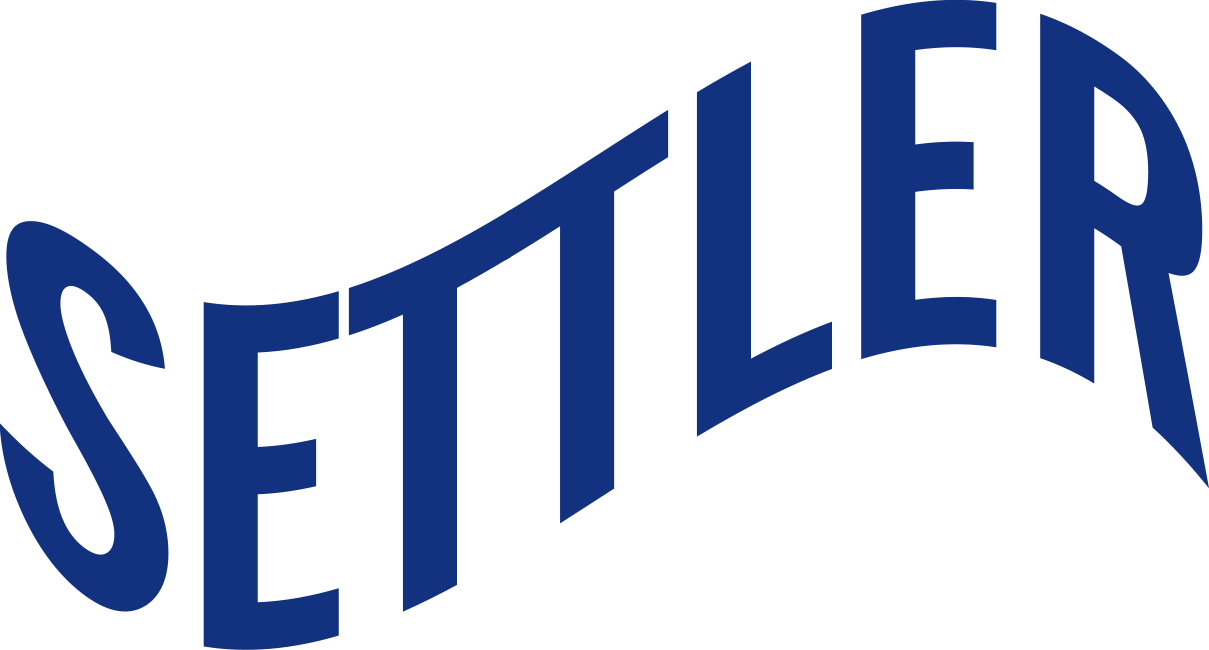
<style>
.page{position:relative;width:1209px;height:650px;background:#ffffff}
.page>*{position:absolute;margin:0}
.t1{font:486.1px "AlternateGothicNo2BT-Regular";color:#12317e}
</style>
<div class="page">
<p class="t1" style="left:0px;top:0px;width:1209px;height:650px">SETTLER</p>
</div>
